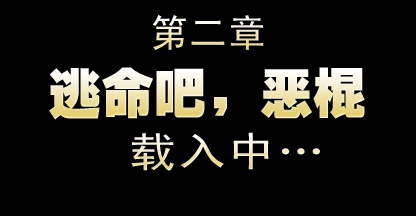
<style>
.page{position:relative;width:416px;height:216px;background:#000000}
.page>*{position:absolute;margin:0}
.t1{font:38px "SimHei";letter-spacing:0.03em;text-transform:uppercase}
.t2{font:53px "HeitiEG-Ultra-GB";text-transform:uppercase}
.t3{font:40.9px "SimHei";letter-spacing:0.03em;scale:1.18 1}
</style>
<div class="page">
<p class="t1" style="left:152px;top:14px;width:112px;height:36px">第二章</p>
<p class="t2" style="left:49px;top:67px;width:316px;height:53px">逃命吧，恶棍</p>
<p class="t3" style="left:131px;top:132px;width:189px;height:39px">载入中…</p>
</div>
